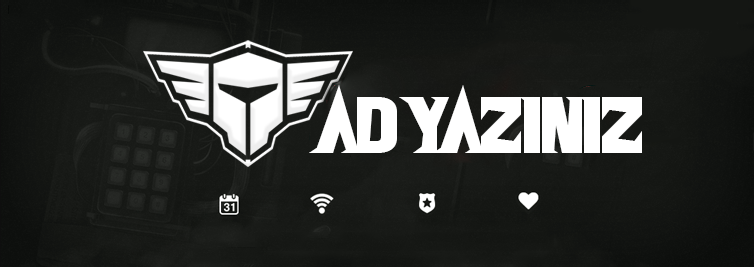
<style>
.page{position:relative;width:754px;height:267px}
.page>*{position:absolute;margin:0}
.t1{font:82.4px "VealNerve";letter-spacing:-0.025em;color:#ffffff}
</style>
<div class="page">
<p class="t1" style="left:309px;top:85px;width:333px;height:68px">AD YAZINIZ</p>
</div>
